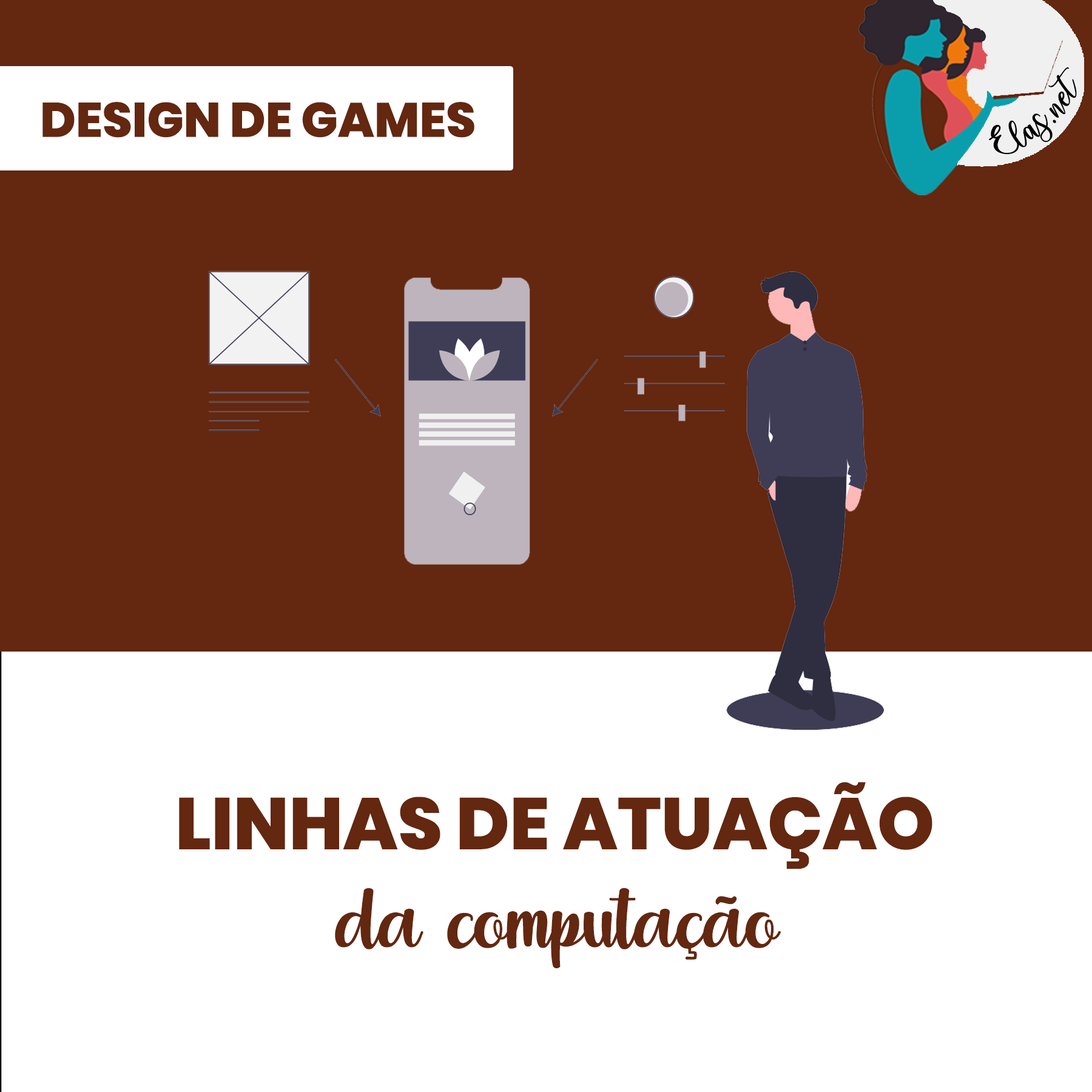
<style>
.page{position:relative;width:1092px;height:1092px;background:#64270f}
.page>*{position:absolute;margin:0}
.t1{font:25px "charlinda-Regular";color:#000000;scale:1.18 1}
.t2{font:48.5px "Poppins-ExtraBold";color:#64270f}
.t3{font:72.8px "Poppins-ExtraBold";color:#64270f}
.t4{font:133.5px "puttroe";color:#64270f}
</style>
<div class="page">
<p class="t1" style="left:989px;top:67px;width:88px;height:87px;rotate:-42deg">Elas.net</p>
<p class="t2" style="left:42px;top:102px;width:432px;height:36px">DESIGN DE GAMES</p>
<p class="t3" style="left:179px;top:782px;width:753px;height:87px">LINHAS DE ATUAÇÃO</p>
<p class="t4" style="left:335px;top:888px;width:446px;height:80px">da computação</p>
</div>
